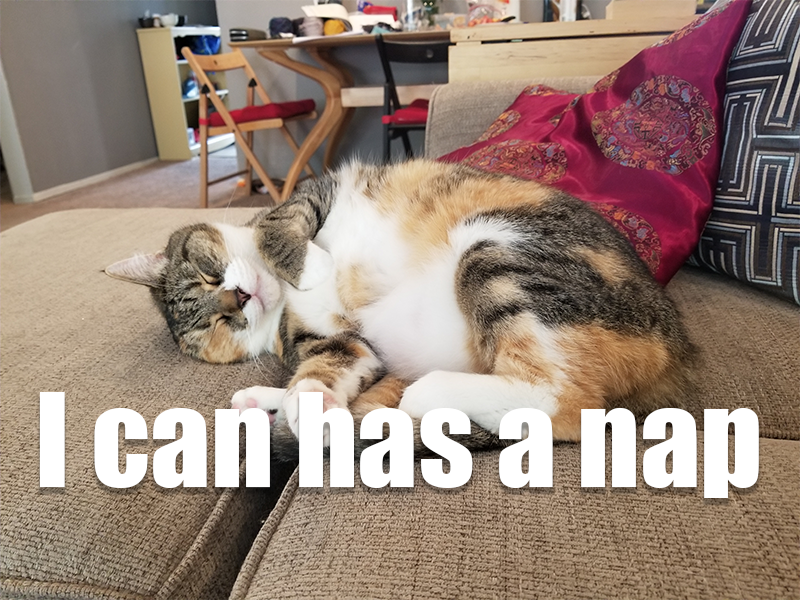
<style>
.page{position:relative;width:800px;height:600px}
.page>*{position:absolute;margin:0}
.t1{font:120px "Impact";color:#ffffff}
</style>
<div class="page">
<p class="t1" style="left:39px;top:392px;width:720px;height:106px">I can has a nap</p>
</div>
